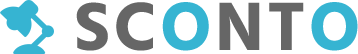
<style>
.page{position:relative;width:358px;height:54px;background:#ffffff}
.page>*{position:absolute;margin:0}
.t1{font:70px "Hind-Bold";letter-spacing:0.05em;color:#666666;text-transform:uppercase}
.t2{font:70px "Hind-Bold";letter-spacing:0.05em;color:#36b4d2;text-transform:uppercase}
</style>
<div class="page">
<p class="t1" style="left:76px;top:2px;width:282px;height:49px">Sc<span class="t2">o</span>nt<span class="t2">o</span></p>
</div>
